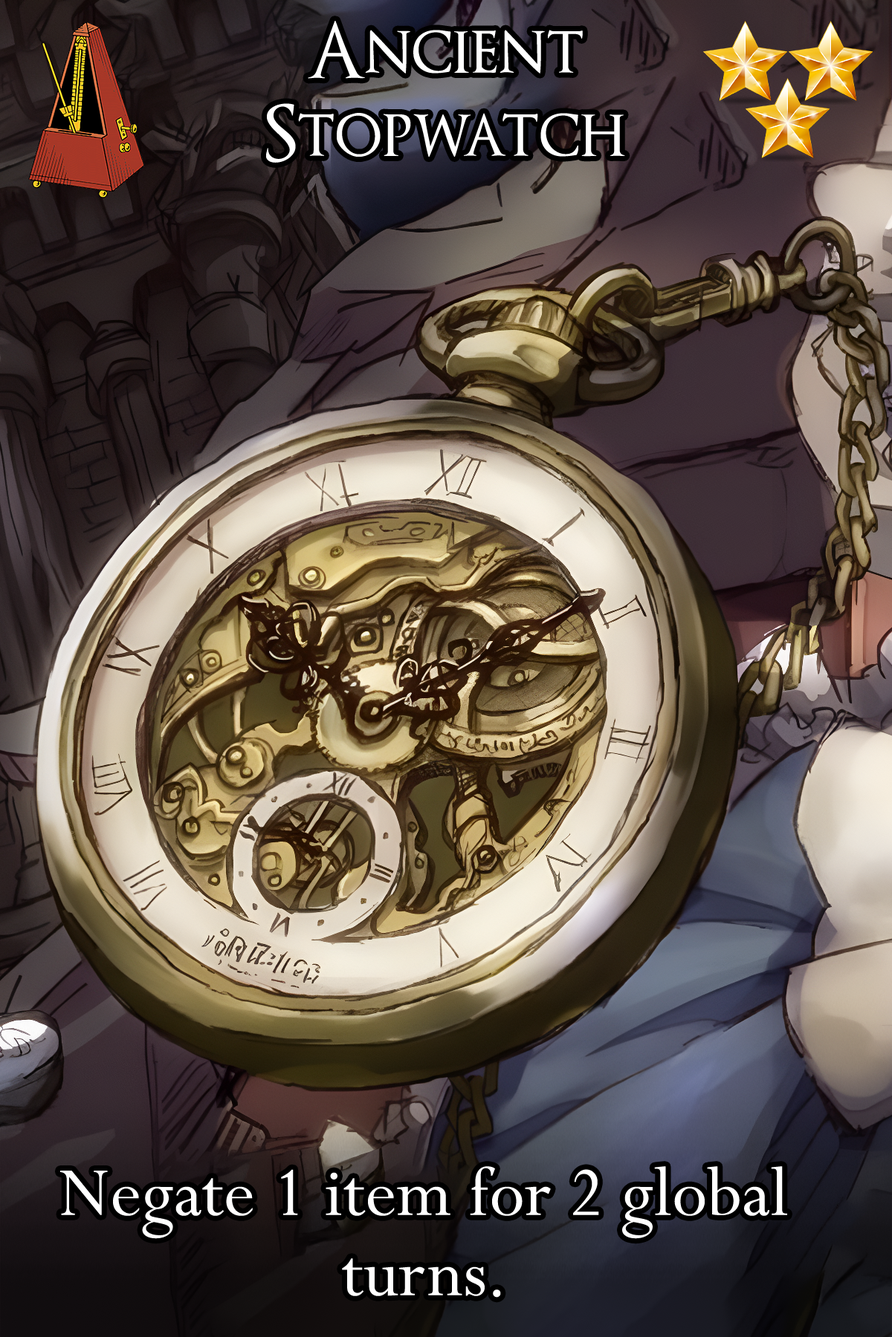
<style>
.page{position:relative;width:892px;height:1337px}
.page>*{position:absolute;margin:0}
.t1{font:130px/83.2px "OptimusPrinceps";color:#ffffff}
.t2{font:132.3px "Perpetua";color:#ffffff}
</style>
<div class="page">
<p class="t1" style="left:266px;top:21px;width:359px;height:142px;text-align:center">Ancient<br>Stopwatch</p>
<p class="t2" style="left:60px;top:1167px;width:727px;height:131px">Negate 1 item for 2 global turns.</p>
</div>
